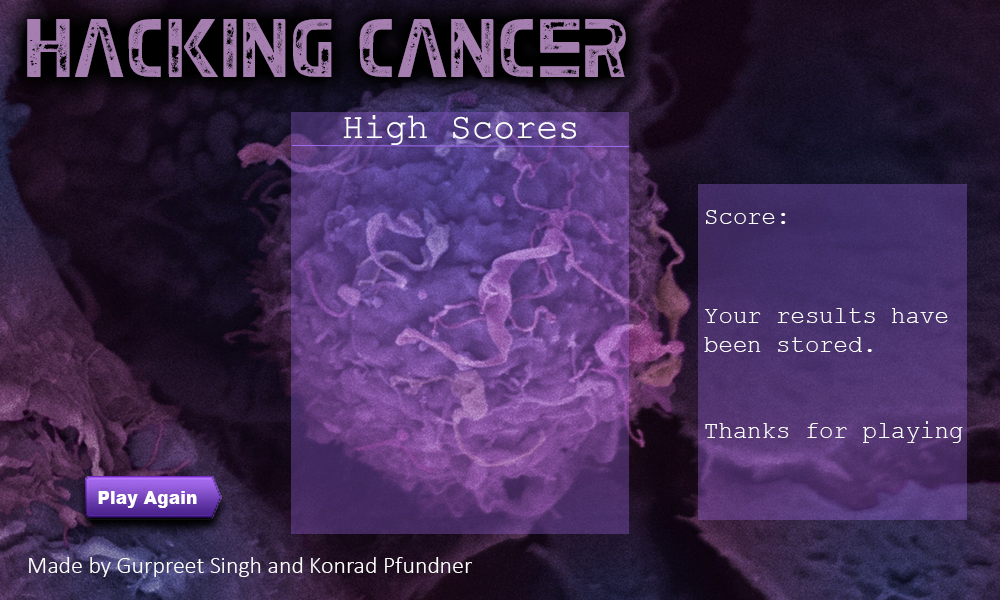
<style>
.page{position:relative;width:1000px;height:600px}
.page>*{position:absolute;margin:0}
.t1{font:75px "EarthKid";color:#a57fb0}
.t2{font:36px "CourierNewPSMT";color:#ffffff}
.t3{font:24px "CourierNewPSMT";color:#ffffff}
.t4{font:17.6px "Arial-Black";color:#ffffff}
.t5{font:24px "Calibri-Light";color:#ffffff}
</style>
<div class="page">
<p class="t1" style="left:27px;top:19px;width:599px;height:58px">Hacking Cancer</p>
<p class="t2" style="left:343px;top:115px;width:233px;height:30px">High Scores</p>
<p class="t3" style="left:706px;top:210px;width:80px;height:14px">Score:</p>
<p class="t3" style="left:704px;top:308px;width:259px;height:135px">Your results have <br>been stored.<br><br><br>Thanks for playing</p>
<p class="t4" style="left:98px;top:491px;width:99px;height:17px">Play Again</p>
<p class="t5" style="left:29px;top:557px;width:443px;height:20px">Made by Gurpreet Singh and Konrad Pfundner</p>
</div>
